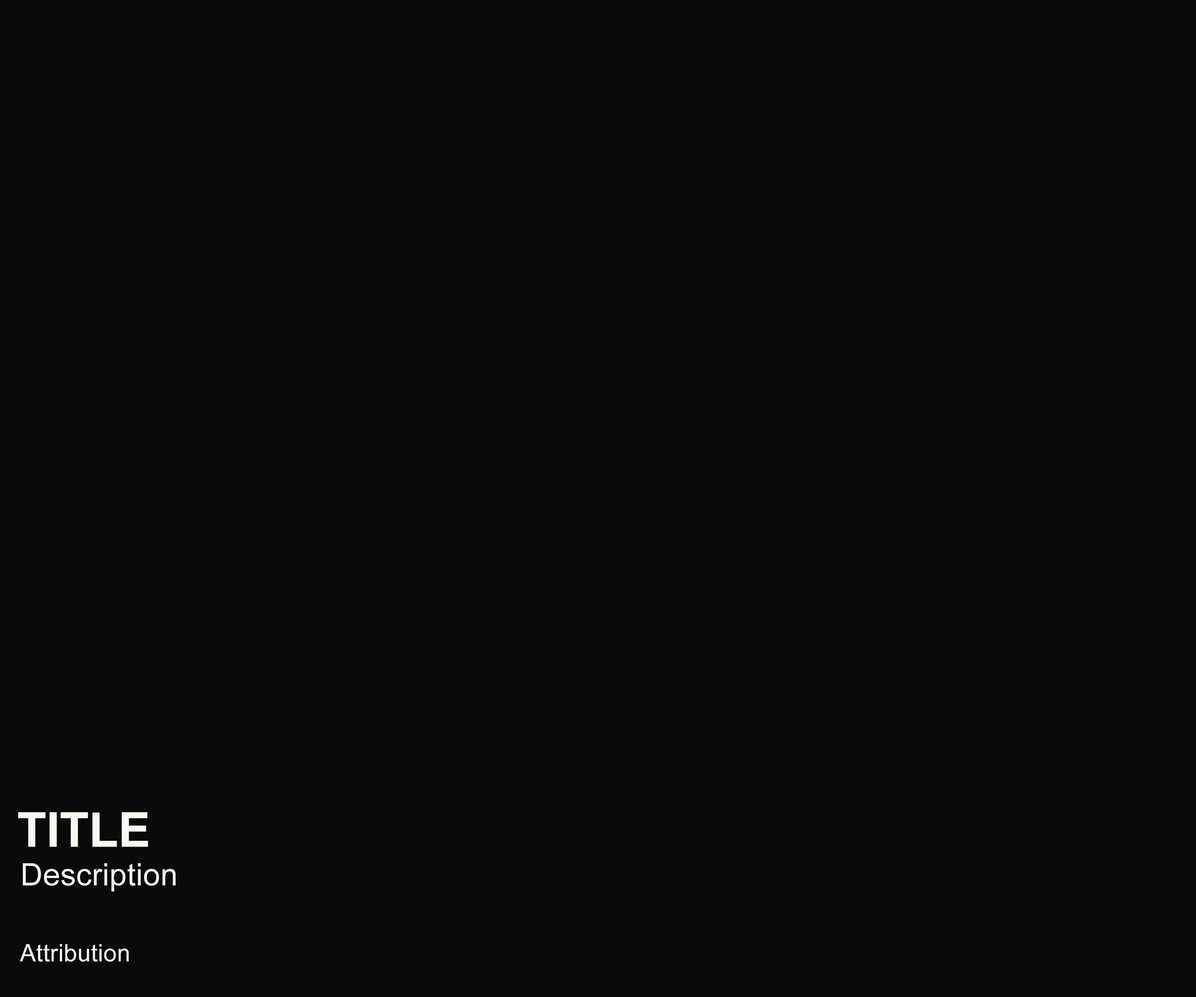
<style>
.page{position:relative;width:1196px;height:997px;background:#0a0a0a}
.page>*{position:absolute;margin:0}
.t1{font:48px "Arial-BoldMT";color:#f9f9f1;text-transform:uppercase}
.t2{font:30.8px "ArialMT";letter-spacing:0.01em;color:#f5f6f0}
.t3{font:24px "ArialMT";letter-spacing:0.01em;color:#f9f9f1}
</style>
<div class="page">
<p class="t1" style="left:18px;top:812px;width:130px;height:35px">Title</p>
<p class="t2" style="left:23px;top:863px;width:153px;height:28px">Description</p>
<p class="t3" style="left:20px;top:944px;width:109px;height:18px">Attribution</p>
</div>
